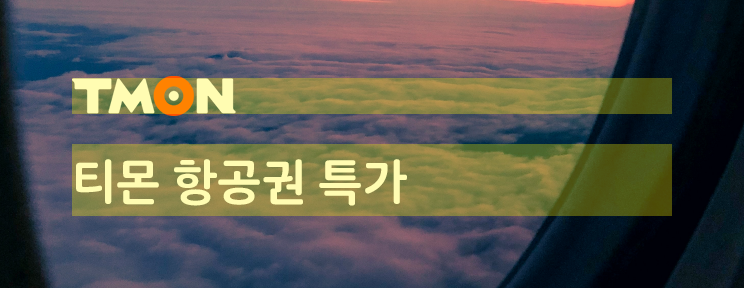
<style>
.page{position:relative;width:744px;height:288px}
.page>*{position:absolute;margin:0}
.t1{font:48px "SDpwingGothicNeoRound-gBd";color:#fffcb2}
</style>
<div class="page">
<p class="t1" style="left:76px;top:159px;width:331px;height:47px">티몬 항공권 특가</p>
</div>
